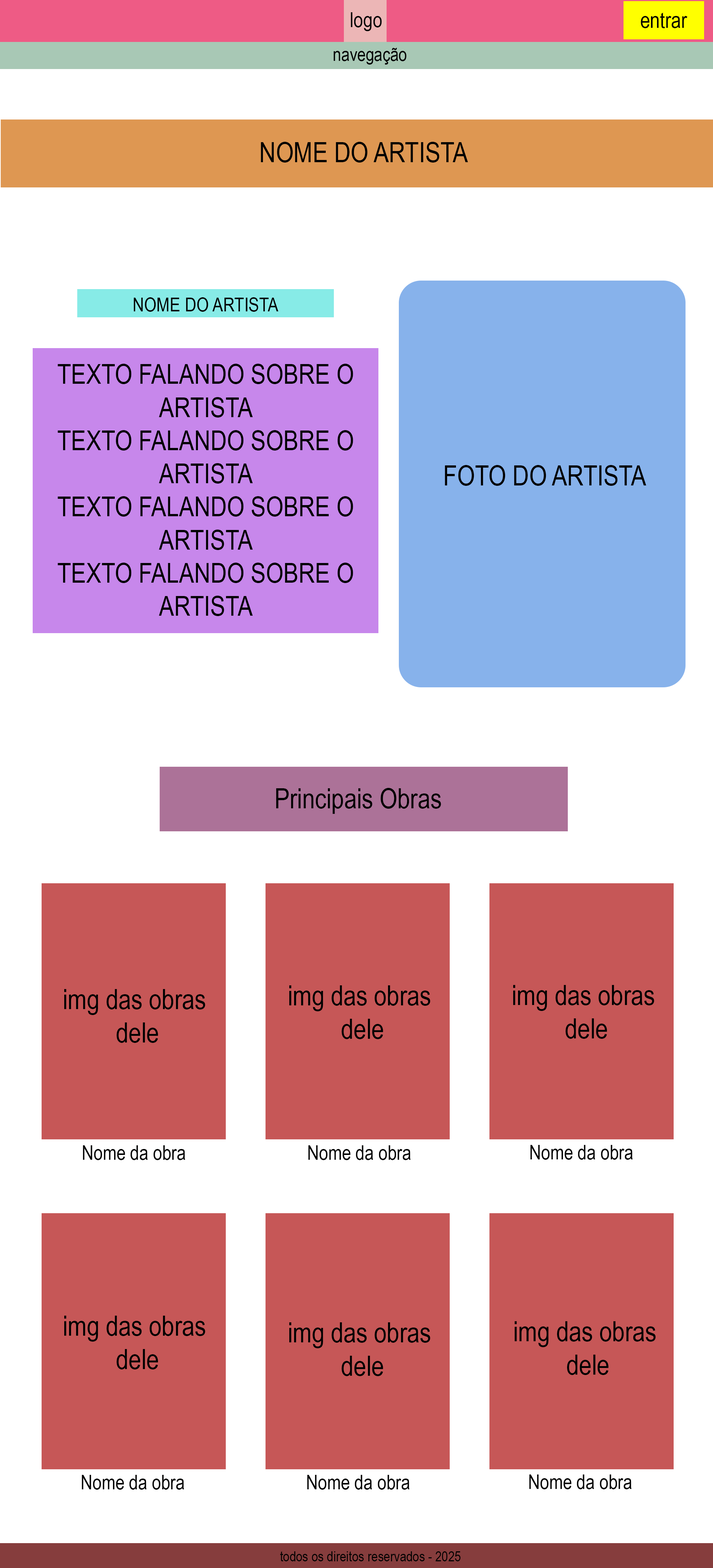
<style>
.page{position:relative;width:713px;height:1568px;background:#ffffff}
.page>*{position:absolute;margin:0}
.t1{font:20.9px "ArialNarrow";color:#000000}
.t2{font:21.8px "ArialNarrow";color:#000000}
.t3{font:18.5px "ArialNarrow";color:#000000}
.t4{font:27.8px "ArialNarrow";color:#000000}
.t5{font:19.5px "ArialNarrow";color:#000000}
.t6{font:27.6px "ArialNarrow";color:#000000}
.t7{font:20px "ArialNarrow";color:#000000}
.t8{font:14.1px "ArialNarrow";color:#000000}
</style>
<div class="page">
<p class="t1" style="left:350px;top:12px;width:32px;height:19px">logo</p>
<p class="t2" style="left:640px;top:13px;width:47px;height:15px">entrar</p>
<p class="t3" style="left:333px;top:48px;width:73px;height:17px">navegação</p>
<p class="t4" style="left:261px;top:142px;width:207px;height:21px">NOME DO ARTISTA</p>
<p class="t5" style="left:134px;top:297px;width:144px;height:15px">NOME DO ARTISTA</p>
<p class="t6" style="left:58px;top:364px;width:295px;height:252px;text-align:center">TEXTO FALANDO SOBRE O ARTISTA<br>TEXTO FALANDO SOBRE O ARTISTA<br>TEXTO FALANDO SOBRE O ARTISTA<br>TEXTO FALANDO SOBRE O ARTISTA</p>
<p class="t4" style="left:445px;top:465px;width:201px;height:21px">FOTO DO ARTISTA</p>
<p class="t4" style="left:276px;top:788px;width:165px;height:26px">Principais Obras</p>
<p class="t4" style="left:64px;top:989px;width:141px;height:54px;text-align:center">img das obras <br>dele</p>
<p class="t4" style="left:289px;top:985px;width:141px;height:54px;text-align:center">img das obras <br>dele</p>
<p class="t4" style="left:513px;top:985px;width:141px;height:54px;text-align:center">img das obras <br>dele</p>
<p class="t7" style="left:83px;top:1145px;width:102px;height:15px">Nome da obra</p>
<p class="t7" style="left:308px;top:1145px;width:102px;height:15px">Nome da obra</p>
<p class="t7" style="left:530px;top:1145px;width:102px;height:15px">Nome da obra</p>
<p class="t4" style="left:64px;top:1316px;width:141px;height:53px;text-align:center">img das obras <br>dele</p>
<p class="t4" style="left:289px;top:1322px;width:141px;height:54px;text-align:center">img das obras <br>dele</p>
<p class="t4" style="left:514px;top:1321px;width:141px;height:54px;text-align:center">img das obras <br>dele</p>
<p class="t7" style="left:82px;top:1475px;width:102px;height:15px">Nome da obra</p>
<p class="t7" style="left:307px;top:1475px;width:102px;height:15px">Nome da obra</p>
<p class="t7" style="left:529px;top:1474px;width:102px;height:15px">Nome da obra</p>
<p class="t8" style="left:280px;top:1551px;width:180px;height:10px">todos os direitos reservados - 2025</p>
</div>
